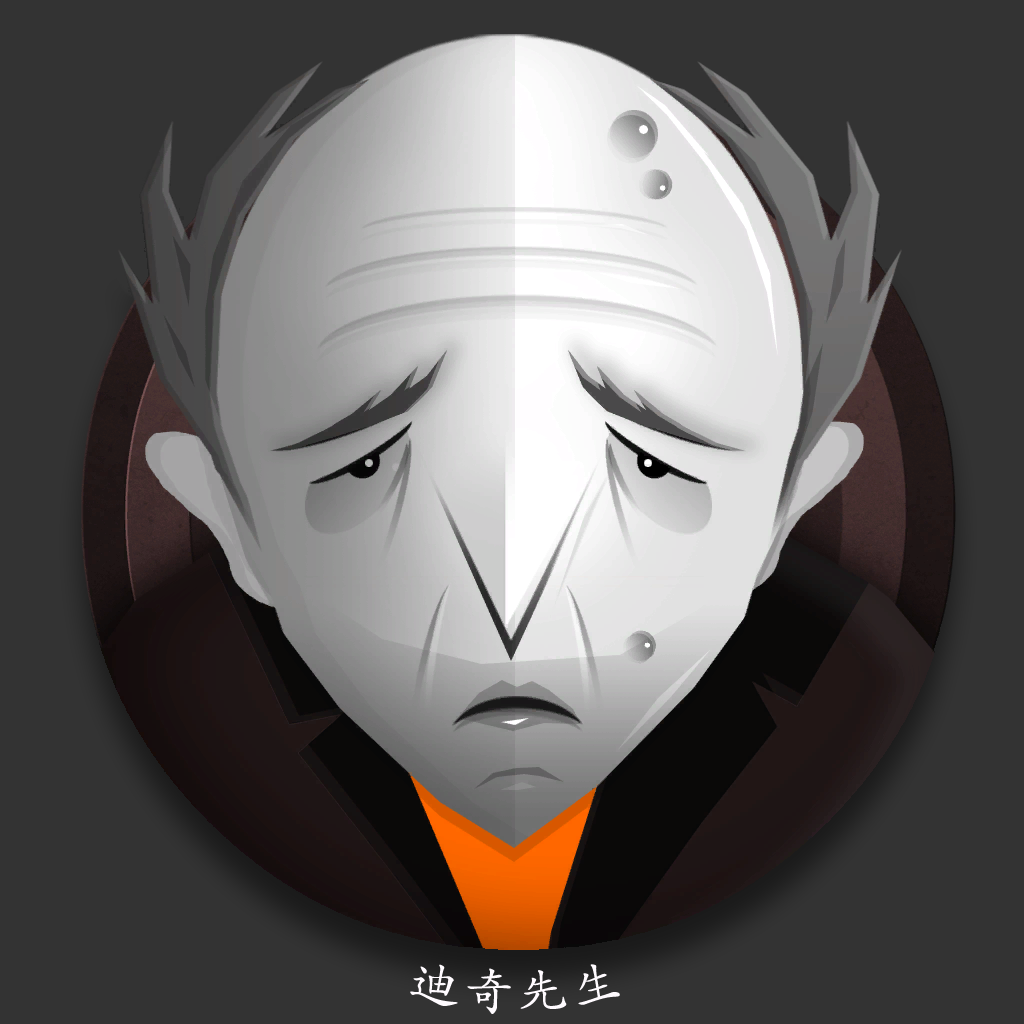
<style>
.page{position:relative;width:1024px;height:1024px;background:#333333}
.page>*{position:absolute;margin:0}
.t1{font:48px "STKaiti";letter-spacing:0.05em;color:#fffbff}
</style>
<div class="page">
<p class="t1" style="left:410px;top:964px;width:210px;height:50px">迪奇先生</p>
</div>
